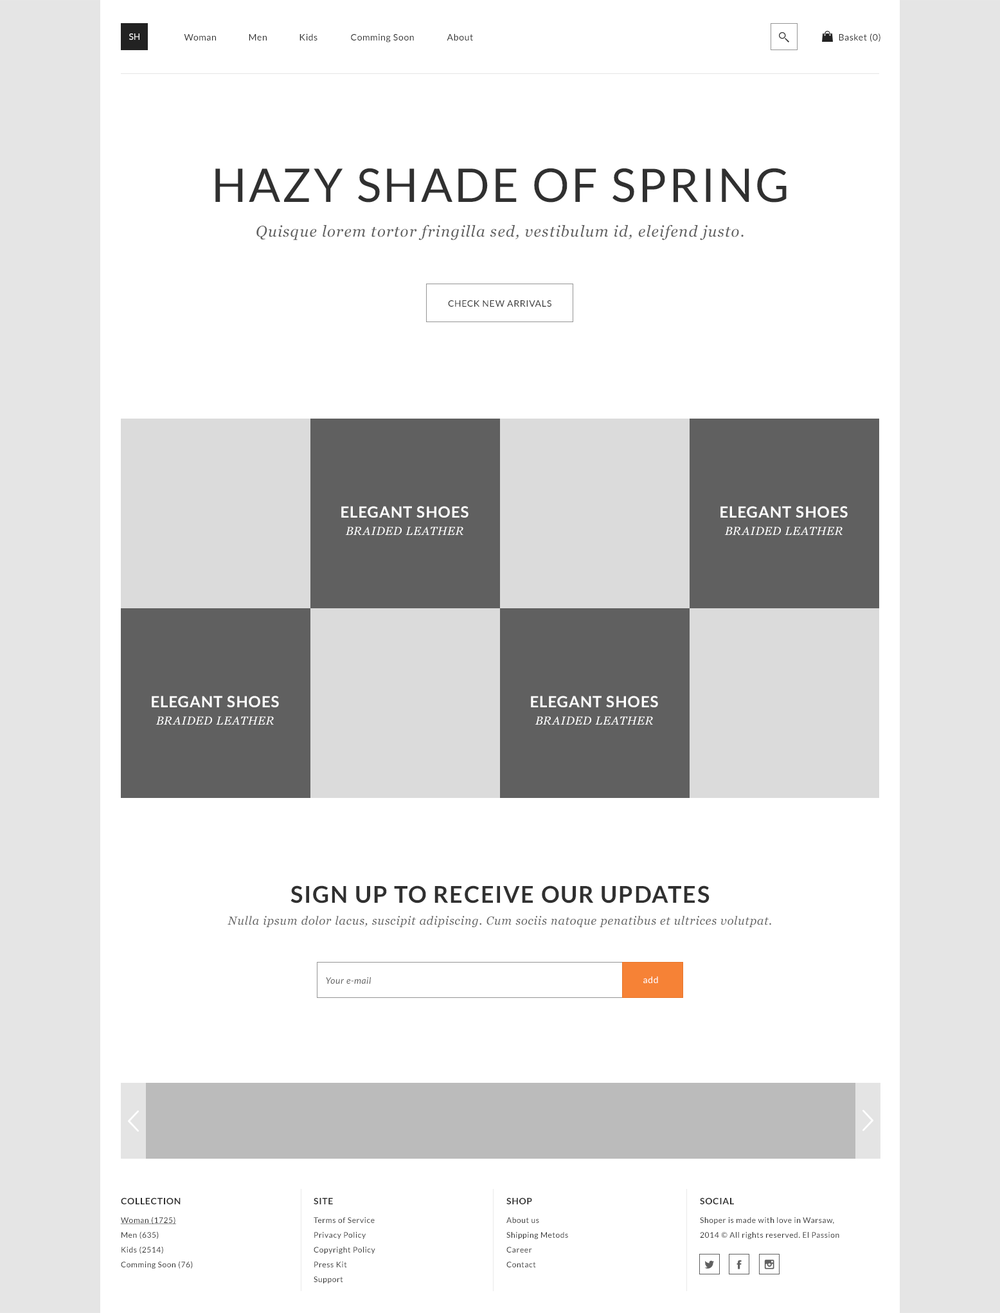
<style>
.page{position:relative;width:1000px;height:1313px;background:#ffffff}
.page>*{position:absolute;margin:0}
.t1{font:9px "Lato-Regular";color:#ffffff;text-transform:uppercase}
.t2{font:9px "Lato-Regular";letter-spacing:0.05em;color:#303030}
.t3{font:46.3px "Lato-Regular";letter-spacing:0.05em;color:#303030;text-transform:uppercase}
.t4{font:15.4px "Georgia-Italic";letter-spacing:0.05em;color:#606060}
.t5{font:9px "Lato-Regular";letter-spacing:0.05em;color:#303030;text-transform:uppercase}
.t6{font:11.6px/17.4px "Georgia-Italic";letter-spacing:0.05em;color:#ffffff;text-transform:uppercase}
.t7{font:15.4px/17.4px "Lato-Bold";letter-spacing:0.05em;color:#ffffff;text-transform:uppercase}
.t8{font:23.1px "Lato-Bold";letter-spacing:0.05em;color:#303030;text-transform:uppercase}
.t9{font:11.6px "Georgia-Italic";letter-spacing:0.05em;color:#606060}
.t10{font:9px "Lato-Italic";letter-spacing:0.05em;color:#606060}
.t11{font:9px "Lato-Regular";letter-spacing:0.05em;color:#ffffff}
.t12{font:9px "Lato-Bold";letter-spacing:0.05em;color:#303030;text-transform:uppercase}
.t13{font:7.7px/14.8px "Lato-Regular";letter-spacing:0.05em;color:#303030}
.t14{font:7.7px/14.8px "Lato-Regular";letter-spacing:0.05em;color:#303030;text-decoration:underline}
</style>
<div class="page">
<p class="t1" style="left:129px;top:33px;width:11px;height:7px">sh</p>
<p class="t2" style="left:184px;top:34px;width:32px;height:6px">Woman</p>
<p class="t2" style="left:249px;top:34px;width:18px;height:6px">Men</p>
<p class="t2" style="left:300px;top:33px;width:18px;height:7px">Kids</p>
<p class="t2" style="left:351px;top:33px;width:63px;height:9px">Comming Soon</p>
<p class="t2" style="left:447px;top:33px;width:26px;height:7px">About</p>
<p class="t2" style="left:839px;top:33px;width:42px;height:9px">Basket (0)</p>
<p class="t3" style="left:215px;top:168px;width:572px;height:35px">Hazy Shade of spring</p>
<p class="t4" style="left:256px;top:224px;width:488px;height:16px">Quisque lorem tortor fringilla sed, vestibulum id, eleifend justo.</p>
<p class="t5" style="left:448px;top:300px;width:104px;height:7px">check new arrivals</p>
<p class="t6" style="left:341px;top:506px;width:128px;height:29px;text-align:center"><span class="t7">elegant shoes<br></span>BRAIDED LEATHER</p>
<p class="t6" style="left:721px;top:506px;width:127px;height:29px;text-align:center"><span class="t7">elegant shoes<br></span>BRAIDED LEATHER</p>
<p class="t6" style="left:152px;top:696px;width:127px;height:28px;text-align:center"><span class="t7">elegant shoes<br></span>BRAIDED LEATHER</p>
<p class="t6" style="left:531px;top:696px;width:127px;height:28px;text-align:center"><span class="t7">elegant shoes<br></span>BRAIDED LEATHER</p>
<p class="t8" style="left:291px;top:885px;width:419px;height:18px">sign up to receive our updates</p>
<p class="t9" style="left:228px;top:915px;width:543px;height:12px">Nulla ipsum dolor lacus, suscipit adipiscing. Cum sociis natoque penatibus et ultrices volutpat.</p>
<p class="t10" style="left:326px;top:977px;width:45px;height:7px">Your e-mail</p>
<p class="t11" style="left:644px;top:976px;width:14px;height:7px">add</p>
<p class="t12" style="left:121px;top:1198px;width:60px;height:6px">Collection</p>
<p class="t12" style="left:314px;top:1198px;width:19px;height:6px">site</p>
<p class="t12" style="left:507px;top:1198px;width:25px;height:6px">Shop</p>
<p class="t12" style="left:700px;top:1198px;width:34px;height:6px">social</p>
<p class="t13" style="left:120px;top:1216px;width:73px;height:52px"><span class="t14">Woman (1725)<br></span>Men (635)<br>Kids (2514)<br>Comming Soon (76)</p>
<p class="t13" style="left:314px;top:1217px;width:61px;height:66px">Terms of Service <br>Privacy Policy <br>Copyright Policy <br>Press Kit <br>Support</p>
<p class="t13" style="left:507px;top:1217px;width:61px;height:50px">About us<br>Shipping Metods<br>Career<br>Contact</p>
<p class="t13" style="left:700px;top:1217px;width:140px;height:22px">Shoper is made with love in Warsaw, <br>2014 © All rights reserved. El Passion</p>
</div>
